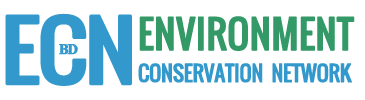
<style>
.page{position:relative;width:365px;height:100px;background:#ffffff}
.page>*{position:absolute;margin:0}
.t1{font:77.9px "Oswald-Regular";letter-spacing:-0.05em;color:#3399cc;font-weight:bold;scale:1.18 1}
.t2{font:37.5px "Oswald-Regular";letter-spacing:-0.01em;color:#339966;font-weight:bold}
.t3{font:14.6px "TimesNewRomanPS-BoldMT";letter-spacing:-0.11em;color:#3399cc;font-weight:bold}
.t4{font:20.8px "Oswald-Regular";letter-spacing:-0.03em;color:#3399cc;font-weight:bold}
</style>
<div class="page">
<p class="t1" style="left:5px;top:13px;width:127px;height:73px">ECN</p>
<p class="t2" style="left:139px;top:16px;width:216px;height:35px">ENVIRONMENT</p>
<p class="t3" style="left:59px;top:44px;width:19px;height:11px">BD</p>
<p class="t4" style="left:138px;top:63px;width:214px;height:20px">CONSERVATION  NETWORK</p>
</div>
